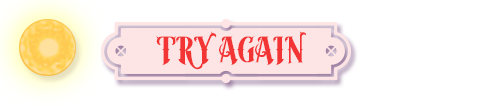
<style>
.page{position:relative;width:484px;height:106px;background:#ffffff}
.page>*{position:absolute;margin:0}
.t1{font:41.7px "Moyers";color:#f23434}
</style>
<div class="page">
<p class="t1" style="left:156px;top:31px;width:150px;height:39px">TRY AGAIN</p>
</div>
